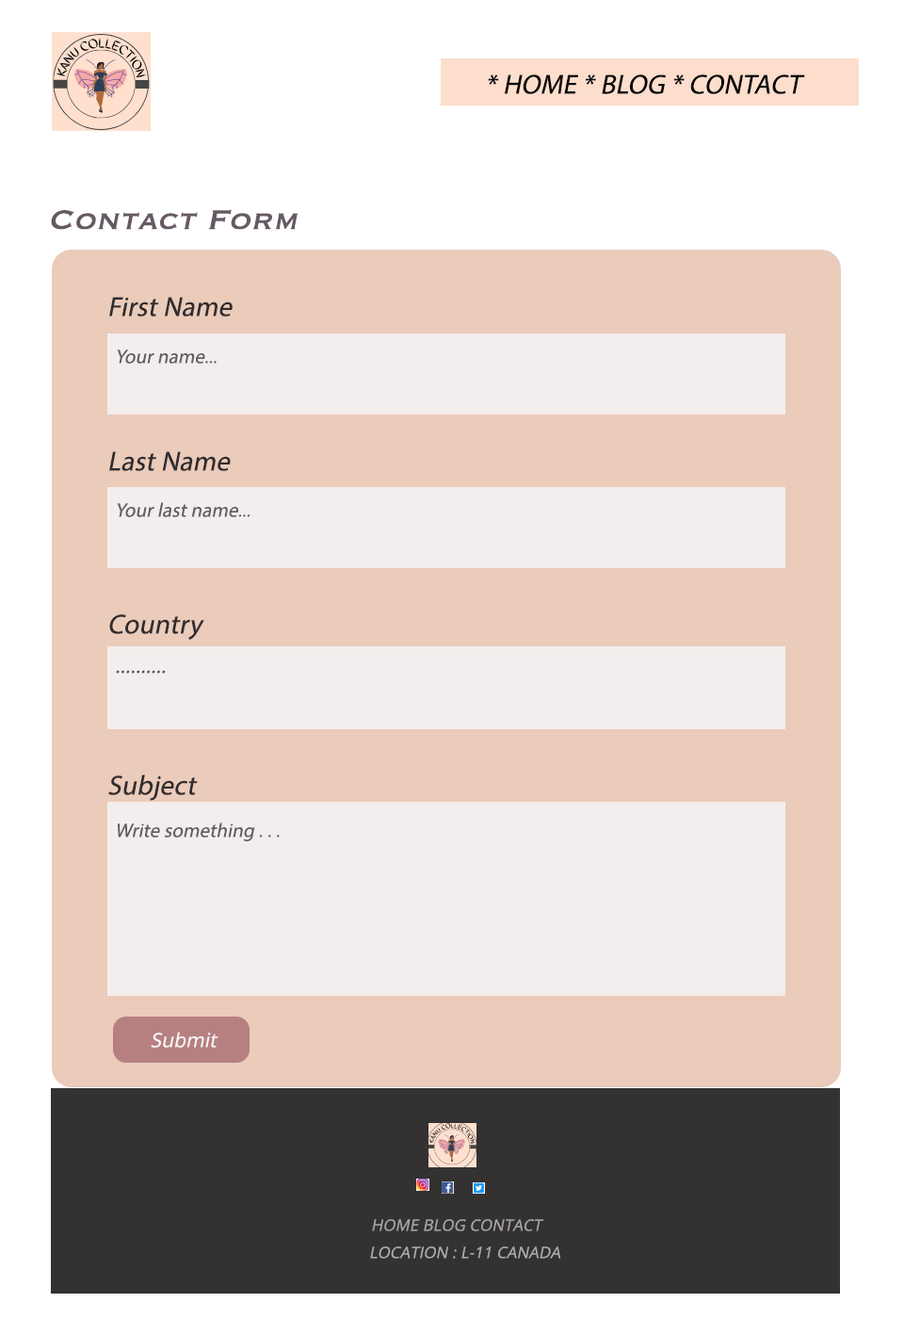
<style>
.page{position:relative;width:904px;height:1319px;background:#ebcbba}
.page>*{position:absolute;margin:0}
.t1{font:27.5px "MyriadPro-Regular";letter-spacing:0.01em;color:#060606;font-style:italic}
.t2{font:35.3px "Copperplate";letter-spacing:0.01em;color:#665964;font-style:italic}
.t3{font:27.5px "MyriadPro-Regular";letter-spacing:0.01em;color:#302c2f;font-style:italic}
.t4{font:19.6px "MyriadPro-Regular";letter-spacing:0.01em;color:#645d63;font-style:italic}
.t5{font:23.5px "MyriadPro-Regular";letter-spacing:0.01em;color:#524750;font-style:italic}
.t6{font:19.6px "OpenSans";letter-spacing:0.01em;color:#f8f6f8;font-style:italic}
.t7{font:15.7px "OpenSans";letter-spacing:0.01em;color:#a6a3a5;font-style:italic}
.t8{font:15.7px "OpenSans";letter-spacing:0.01em;color:#aba9ab;font-style:italic}
</style>
<div class="page">
<p class="t1" style="left:488px;top:74px;width:317px;height:20px">* HOME * BLOG * CONTACT</p>
<p class="t2" style="left:51px;top:209px;width:248px;height:21px">Contact Form</p>
<p class="t3" style="left:109px;top:297px;width:124px;height:19px">First Name</p>
<p class="t4" style="left:117px;top:349px;width:100px;height:15px">Your name...</p>
<p class="t3" style="left:109px;top:451px;width:122px;height:20px">Last Name</p>
<p class="t4" style="left:117px;top:502px;width:134px;height:15px">Your last name...</p>
<p class="t3" style="left:109px;top:614px;width:95px;height:26px">Country</p>
<p class="t5" style="left:116px;top:670px;width:50px;height:3px">..........</p>
<p class="t3" style="left:108px;top:774px;width:90px;height:27px">Subject</p>
<p class="t4" style="left:118px;top:822px;width:162px;height:19px">Write something . . .</p>
<p class="t6" style="left:151px;top:1031px;width:68px;height:16px">Submit</p>
<p class="t7" style="left:372px;top:1219px;width:172px;height:12px">HOME BLOG CONTACT</p>
<p class="t8" style="left:370px;top:1246px;width:190px;height:12px">LOCATION : L-11 CANADA</p>
</div>
